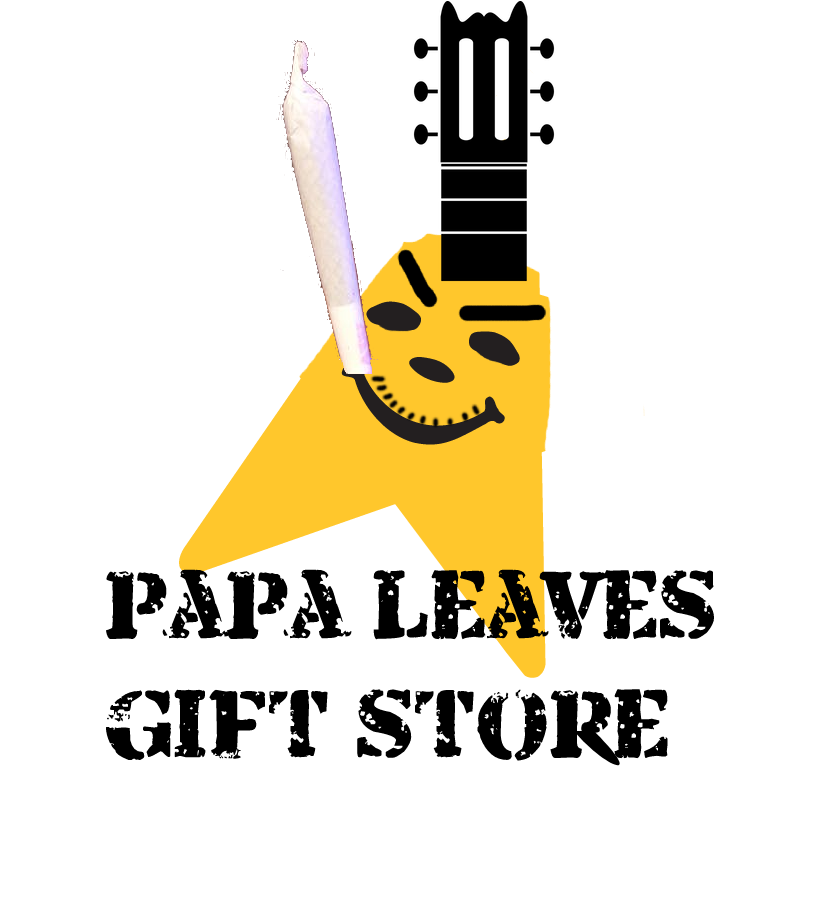
<style>
.page{position:relative;width:820px;height:900px;background:#ffffff}
.page>*{position:absolute;margin:0}
.t1{font:99px "ArmaliteRifle";color:#000000}
</style>
<div class="page">
<p class="t1" style="left:105px;top:569px;width:610px;height:192px">papa leaves<br>gift stope</p>
</div>
